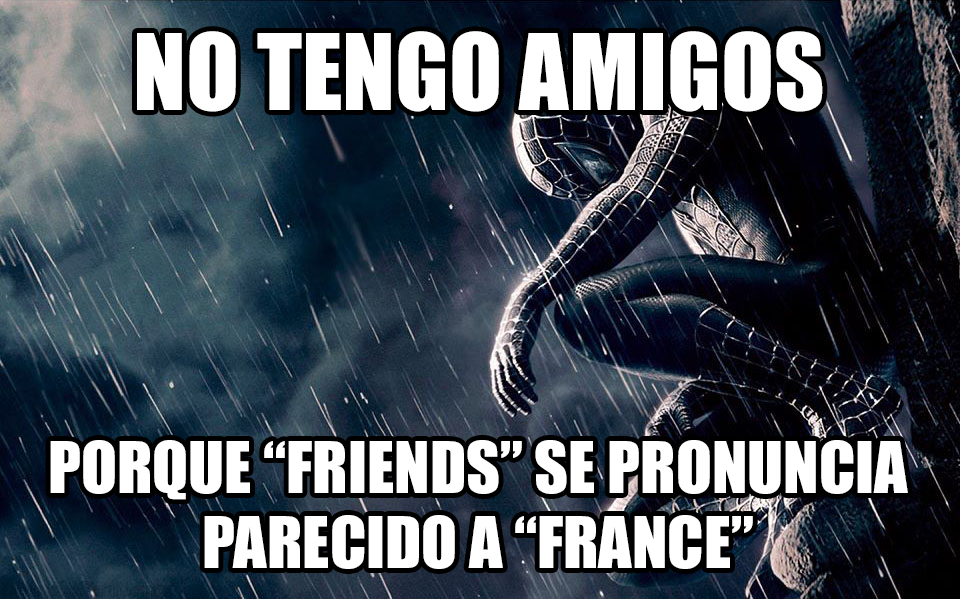
<style>
.page{position:relative;width:960px;height:599px}
.page>*{position:absolute;margin:0}
.t1{font:97.6px "Impact";color:#ffffff}
.t2{font:65.8px "Impact";color:#ffffff}
</style>
<div class="page">
<p class="t1" style="left:137px;top:31px;width:686px;height:81px">NO TENGO AMIGOS</p>
<p class="t2" style="left:50px;top:440px;width:858px;height:129px;text-align:center">PORQUE “FRIENDS” SE PRONUNCIA<br>PARECIDO A “FRANCE”</p>
</div>
